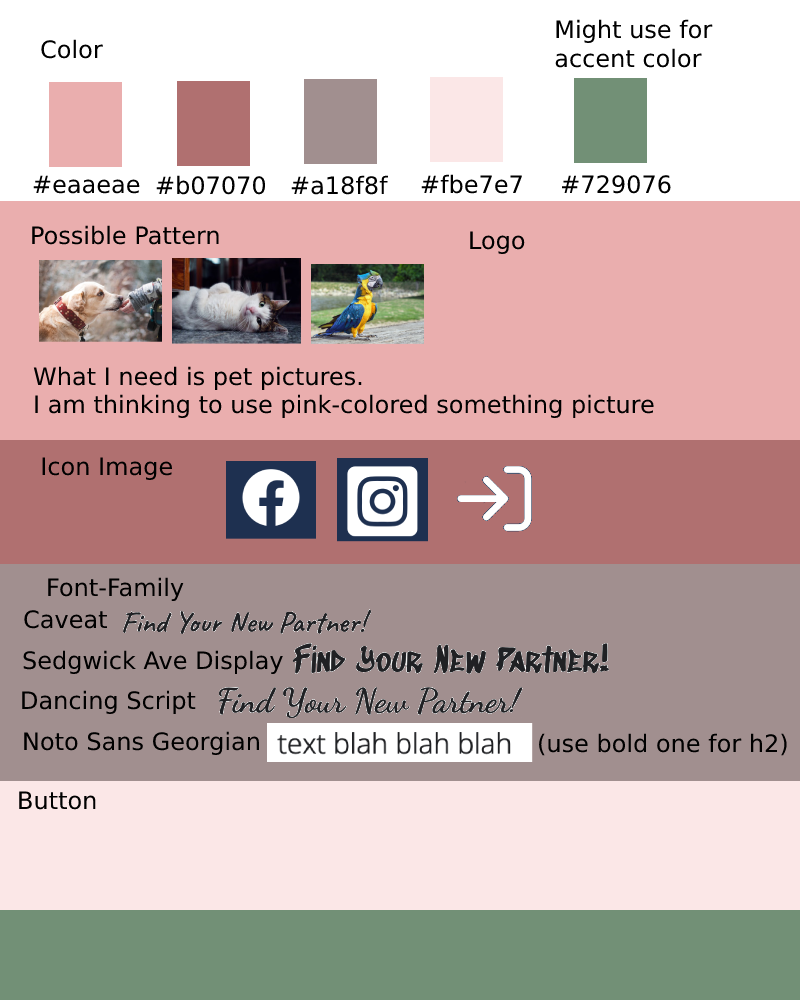
<style>
.page{position:relative;width:800px;height:1000px;background:#eaaeae}
.page>*{position:absolute;margin:0}
.t1{font:24px "DejaVuSans";color:#000000}
</style>
<div class="page">
<p class="t1" style="left:555px;top:19px;width:158px;height:49px">Might use for<br>accent color</p>
<p class="t1" style="left:41px;top:39px;width:62px;height:20px">Color</p>
<p class="t1" style="left:421px;top:174px;width:101px;height:20px">#fbe7e7</p>
<p class="t1" style="left:33px;top:175px;width:107px;height:19px">#eaaeae</p>
<p class="t1" style="left:156px;top:175px;width:110px;height:20px">#b07070</p>
<p class="t1" style="left:291px;top:175px;width:97px;height:20px">#a18f8f</p>
<p class="t1" style="left:562px;top:175px;width:109px;height:19px">#729076</p>
<p class="t1" style="left:32px;top:225px;width:187px;height:20px">Possible Pattern</p>
<p class="t1" style="left:470px;top:231px;width:55px;height:23px">Logo</p>
<p class="t1" style="left:33px;top:366px;width:621px;height:52px">What I need is pet pictures.<br>I am thinking to use pink-colored something picture</p>
<p class="t1" style="left:42px;top:457px;width:130px;height:23px">Icon Image</p>
<p class="t1" style="left:48px;top:577px;width:136px;height:24px">Font-Family</p>
<p class="t1" style="left:24px;top:610px;width:83px;height:19px">Caveat</p>
<p class="t1" style="left:23px;top:650px;width:260px;height:24px">Sedgwick Ave Display</p>
<p class="t1" style="left:22px;top:690px;width:174px;height:24px">Dancing Script</p>
<p class="t1" style="left:24px;top:731px;width:235px;height:24px">Noto Sans Georgian</p>
<p class="t1" style="left:539px;top:733px;width:248px;height:23px">(use bold one for h2)</p>
<p class="t1" style="left:19px;top:791px;width:77px;height:19px">Button</p>
</div>
